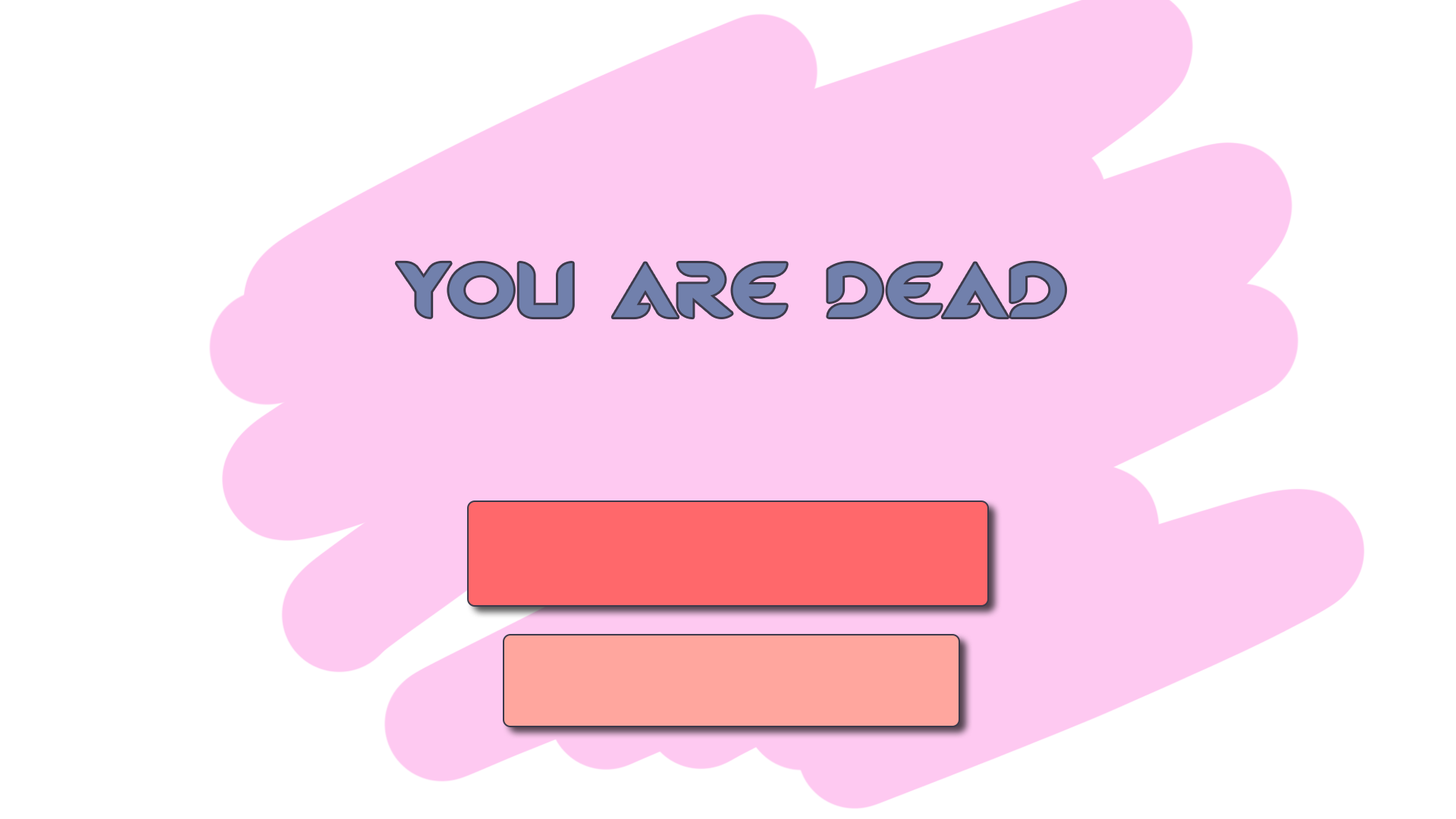
<style>
.page{position:relative;width:1456px;height:819px;background:#ffffff}
.page>*{position:absolute;margin:0}
.t1{font:74.3px "MagmawaveCaps-Bold";color:#7180ac;scale:1.2 1}
</style>
<div class="page">
<p class="t1" style="left:397px;top:262px;width:668px;height:56px">YOU ARE DEAD</p>
</div>
